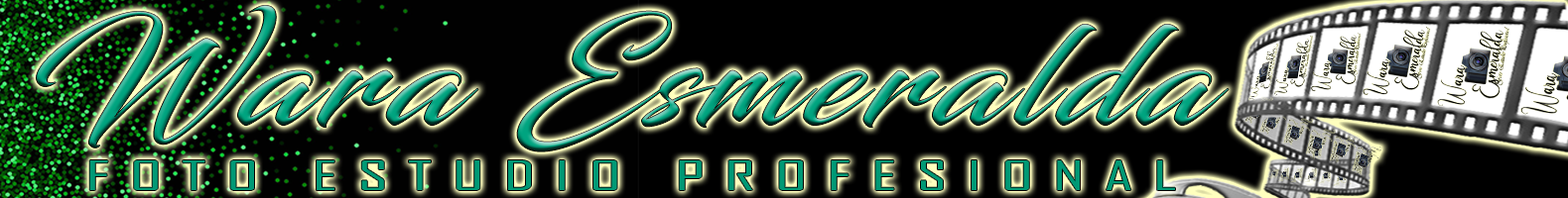
<style>
.page{position:relative;width:1568px;height:198px;background:#000000}
.page>*{position:absolute;margin:0}
.t1{font:136.2px "Blacksword";letter-spacing:0.06em;scale:1.1 1}
.t2{font:38.9px "AgencyFB-Reg";letter-spacing:0.28em;color:#009975;scale:1.84 1}
</style>
<div class="page">
<p class="t1" style="left:36px;top:5px;width:1193px;height:147px">Wara Esmeralda</p>
<p class="t2" style="left:89px;top:161px;width:1086px;height:30px">FOTO ESTUDIO PROFESIONAL</p>
</div>
